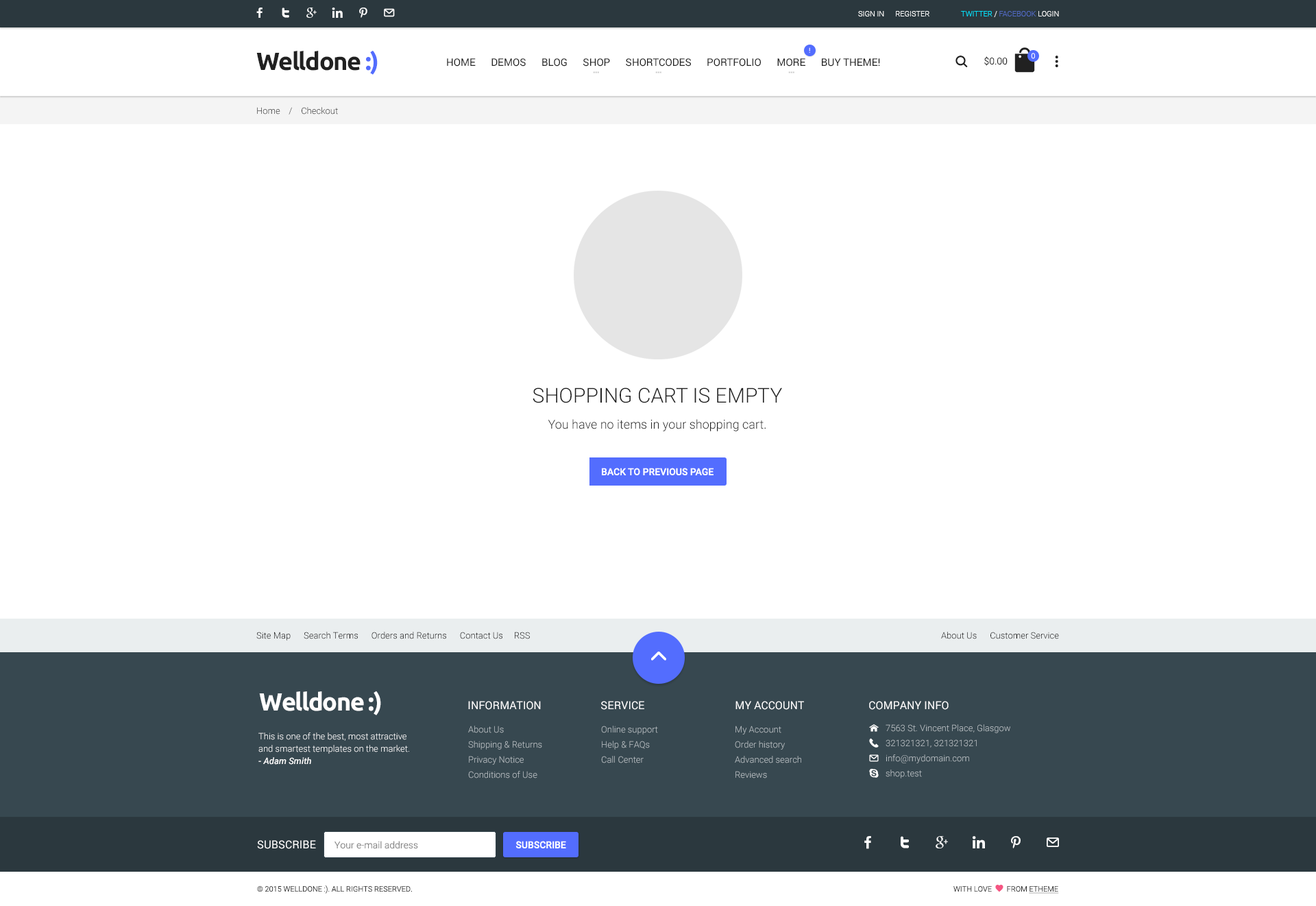
<style>
.page{position:relative;width:1316px;height:906px;background:#ffffff}
.page>*{position:absolute;margin:0}
.t1{font:7.5px "Roboto-Light";color:#ffffff}
.t2{font:7.5px "Roboto-Light";color:#526ac4}
.t3{font:7.5px "Roboto-Light";color:#00e4ff}
.t4{font:24.7px "Ubuntu-Bold";letter-spacing:-0.04em;color:#212121}
.t5{font:24.7px "Ubuntu-Bold";letter-spacing:-0.04em;color:#536dfe}
.t6{font:6.9px "Roboto-Regular"}
.t7{font:10.3px "Roboto-Regular";color:#212121}
.t8{font:9.6px "Roboto-Light";color:#212121}
.t9{font:8.9px "Roboto-Light";color:#2b2b2b}
.t10{font:12.3px/26.1px "Roboto-Light";color:#212121}
.t11{font:20.6px/26.1px "Roboto-Light";color:#212121;text-transform:uppercase}
.t12{font:9.6px "Roboto-Medium";color:#ffffff;text-transform:uppercase}
.t13{font:8.9px "Roboto-Light";color:#000000}
.t14{font:24.7px "Ubuntu-Bold";letter-spacing:-0.04em;color:#ffffff}
.t15{font:11px "Roboto-Regular";color:#ffffff;text-transform:uppercase}
.t16{font:8.9px/15.1px "Roboto-Light";color:#bbc2c6}
.t17{font:8.9px/12.3px "Roboto-Light";color:#ffffff}
.t18{font:8.9px/12.3px "Roboto-MediumItalic";color:#ffffff}
.t19{font:9.6px "Roboto-Light";color:#848484}
.t20{font:7.5px "Roboto-Light";color:#2b2b2b;text-transform:uppercase}
</style>
<div class="page">
<p class="t1" style="left:858px;top:11px;width:72px;height:5px">SIGN IN      REGISTER</p>
<p class="t2" style="left:961px;top:11px;width:98px;height:6px"><span class="t3">TWITTER </span><span class="t1">/ </span>FACEBOOK <span class="t1">LOGIN</span></p>
<p class="t4" style="left:256px;top:50px;width:122px;height:25px">Welldone <span class="t5">:)</span></p>
<p class="t6" style="left:809px;top:47px;width:1px;height:6px">!</p>
<p class="t1" style="left:1031px;top:53px;width:4px;height:6px">0</p>
<p class="t7" style="left:447px;top:58px;width:433px;height:9px">HOME      DEMOS      BLOG      SHOP      SHORTCODES      PORTFOLIO      MORE      BUY THEME!</p>
<p class="t8" style="left:985px;top:56px;width:23px;height:10px">$0.00</p>
<p class="t9" style="left:257px;top:107px;width:81px;height:8px">Home    /    Checkout</p>
<p class="t10" style="left:533px;top:387px;width:249px;height:44px;text-align:center"><span class="t11">Shopping Cart is Empty<br></span>You have no items in your shopping cart.</p>
<p class="t12" style="left:602px;top:468px;width:112px;height:7px">BACK TO PREVIOUS PAGE</p>
<p class="t13" style="left:256px;top:632px;width:274px;height:8px">Site Map      Search Terms      Orders and Returns      Contact Us     RSS</p>
<p class="t13" style="left:941px;top:632px;width:118px;height:7px">About Us      Customer Service</p>
<p class="t14" style="left:259px;top:690px;width:122px;height:25px">Welldone :)</p>
<p class="t15" style="left:468px;top:701px;width:73px;height:9px">Information</p>
<p class="t15" style="left:601px;top:701px;width:44px;height:9px">service</p>
<p class="t15" style="left:736px;top:701px;width:68px;height:9px">My account</p>
<p class="t15" style="left:869px;top:701px;width:80px;height:9px">Company Info</p>
<p class="t16" style="left:468px;top:725px;width:74px;height:53px">About Us<br>Shipping &amp; Returns<br>Privacy Notice<br>Conditions of Use</p>
<p class="t16" style="left:601px;top:725px;width:57px;height:38px">Online support<br>Help &amp; FAQs<br>Call Center</p>
<p class="t16" style="left:735px;top:725px;width:67px;height:53px">My Account<br>Order history<br>Advanced search<br>Reviews</p>
<p class="t16" style="left:886px;top:724px;width:125px;height:54px">7563 St. Vincent Place, Glasgow<br>321321321, 321321321<br>info@mydomain.com<br>shop.test</p>
<p class="t17" style="left:258px;top:732px;width:151px;height:33px">This is one of the best, most attractive and smartest templates on the market. <br><span class="t18">- Adam Smith</span></p>
<p class="t15" style="left:257px;top:840px;width:59px;height:9px">Subscribe</p>
<p class="t19" style="left:335px;top:841px;width:83px;height:8px">Your e-mail address</p>
<p class="t12" style="left:516px;top:841px;width:50px;height:7px">SUBSCRIBE</p>
<p class="t20" style="left:257px;top:885px;width:155px;height:8px">© 2015 Welldone :). All Rights Reserved.</p>
</div>
